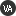
<style>
.page{position:relative;width:16px;height:16px;background:#333333}
.page>*{position:absolute;margin:0}
.t1{font:8px "PublicSans-Medium";letter-spacing:-0.04em;color:#ffffff}
</style>
<div class="page">
<p class="t1" style="left:3px;top:5px;width:9px;height:7px">VA</p>
</div>
